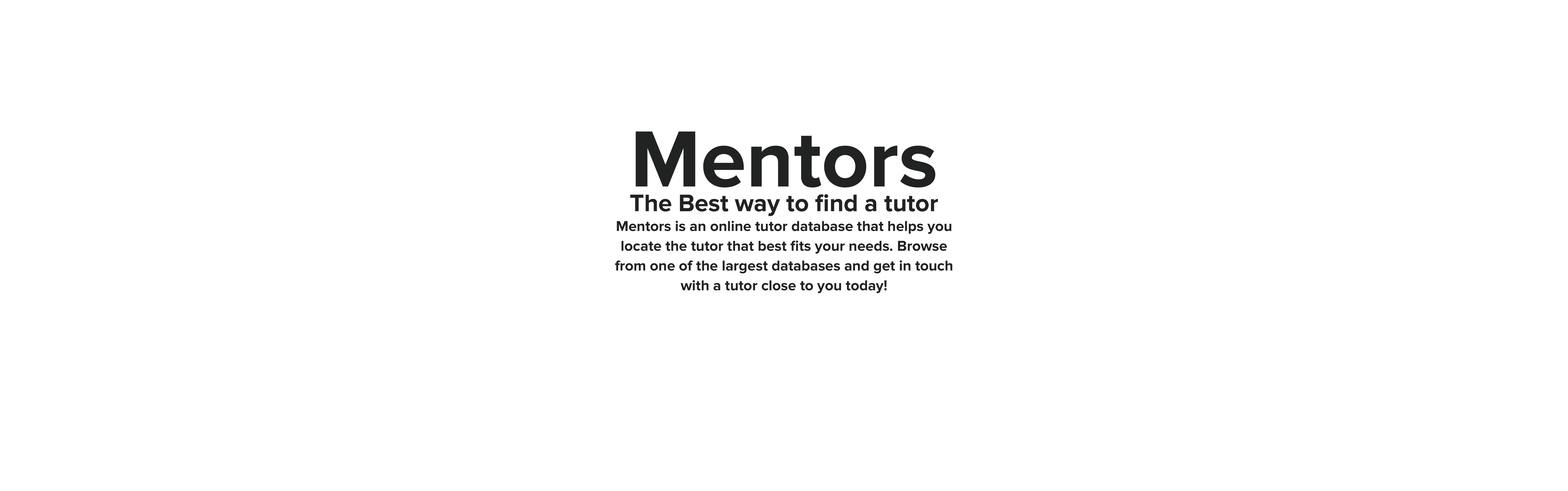
<style>
.page{position:relative;width:1568px;height:491px;background:#ffffff}
.page>*{position:absolute;margin:0}
.t1{font:14.8px/19.8px "ProximaNova-Bold";color:#212222}
.t2{font:82.3px/24.7px "ProximaNova-Bold";color:#212222}
.t3{font:24.7px/24.7px "ProximaNova-Bold";color:#212222}
</style>
<div class="page">
<p class="t1" style="left:615px;top:131px;width:337px;height:162px;text-align:center"><span class="t2">Mentors<br></span><span class="t3">The Best way to find a tutor<br></span>Mentors is an online tutor database that helps you locate the tutor that best fits your needs. Browse from one of the largest databases and get in touch with a tutor close to you today!</p>
</div>
